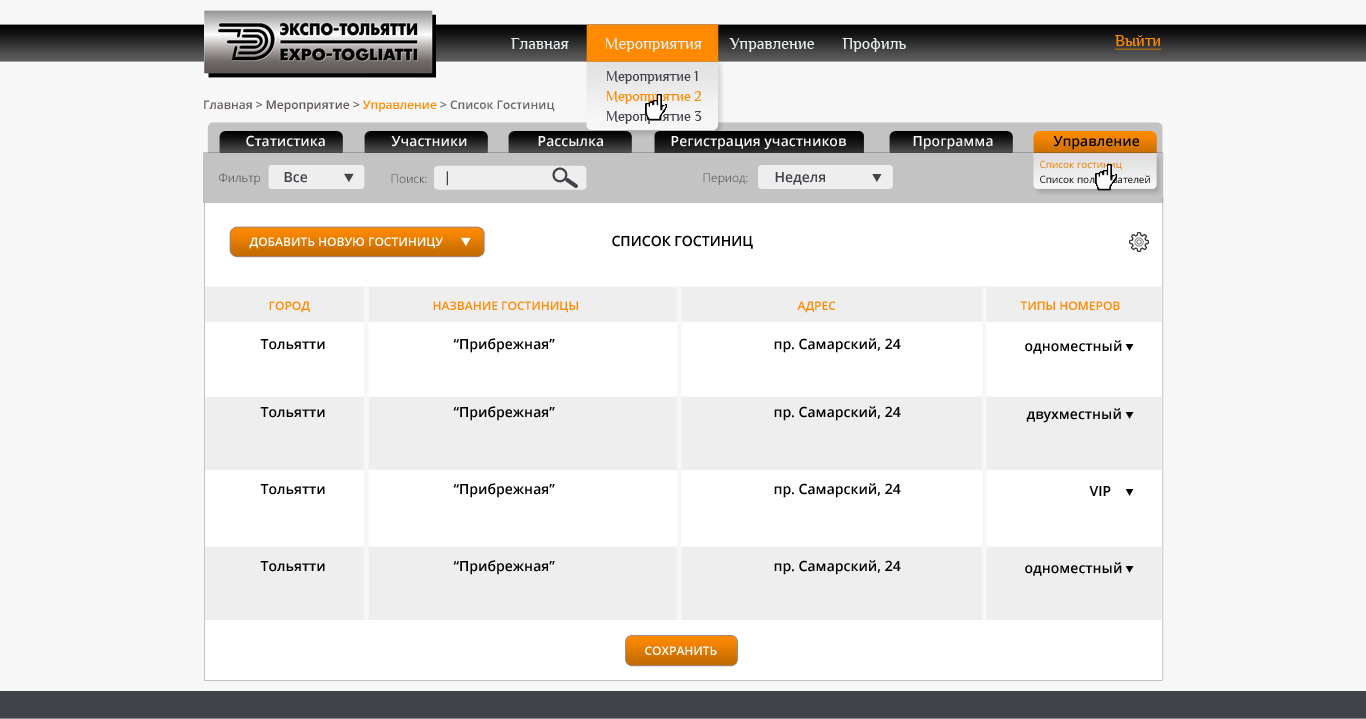
<style>
.page{position:relative;width:1366px;height:719px;background:#f7f7f7}
.page>*{position:absolute;margin:0}
.t1{font:16.5px "Philosopher";color:#e7eff1}
.t2{font:16px "Philosopher";color:#ff8a00;text-decoration:underline}
.t3{font:14.4px/20px "Philosopher";color:#40434a}
.t4{font:14.4px/20px "Philosopher";color:#ff8a00}
.t5{font:12px "OpenSans-Semibold";color:#615a59}
.t6{font:12px "OpenSans-Semibold";color:#ff8a00}
.t7{font:12px "OpenSans-Semibold";color:#65676a}
.t8{font:14px "OpenSans-Semibold";color:#f7f7f7}
.t9{font:14px "OpenSans-Semibold";color:#020202}
.t10{font:10px "OpenSans";color:#ec8001}
.t11{font:12px "OpenSans-Light"}
.t12{font:14px "OpenSans-Semibold";color:#40434a}
.t13{font:12px "OpenSans-Light";color:#40434a}
.t14{font:10px "OpenSans";color:#191919}
.t15{font:12px "OpenSans-Semibold";color:#ffffff}
.t16{font:14px "OpenSans-Semibold";color:#000000}
.t17{font:12px "OpenSans-Semibold";color:#ff8a00;text-transform:uppercase}
</style>
<div class="page">
<p class="t1" style="left:511px;top:38px;width:395px;height:14px">Главная         Мероприятия       Управление       Профиль</p>
<p class="t2" style="left:1115px;top:35px;width:47px;height:15px">Выйти</p>
<p class="t3" style="left:607px;top:71px;width:95px;height:53px">Мероприятие 1<br><span class="t4">Мероприятие 2<br></span>Мероприятие 3</p>
<p class="t5" style="left:204px;top:100px;width:351px;height:12px">Главная &gt; Мероприятие &gt; <span class="t6">Управление </span><span class="t7">&gt; Список Гостиниц</span></p>
<p class="t8" style="left:246px;top:135px;width:79px;height:12px">Статистика</p>
<p class="t8" style="left:391px;top:136px;width:76px;height:11px">Участники</p>
<p class="t8" style="left:538px;top:136px;width:65px;height:11px">Рассылка</p>
<p class="t8" style="left:671px;top:136px;width:175px;height:14px">Регистрация участников</p>
<p class="t8" style="left:913px;top:136px;width:80px;height:14px">Программа</p>
<p class="t9" style="left:1053px;top:136px;width:86px;height:14px">Управление</p>
<p class="t10" style="left:1040px;top:160px;width:82px;height:10px">Список гостиниц</p>
<p class="t11" style="left:219px;top:173px;width:41px;height:12px">Фильтр</p>
<p class="t12" style="left:284px;top:172px;width:23px;height:11px">Все</p>
<p class="t13" style="left:391px;top:174px;width:36px;height:9px">Поиск:</p>
<p class="t12" style="left:446px;top:171px;width:2px;height:15px">|</p>
<p class="t11" style="left:703px;top:173px;width:45px;height:12px">Период:</p>
<p class="t12" style="left:775px;top:172px;width:50px;height:13px">Неделя</p>
<p class="t14" style="left:1040px;top:175px;width:110px;height:8px">Список пользователей</p>
<p class="t15" style="left:249px;top:237px;width:194px;height:12px">ДОБАВИТЬ НОВУЮ ГОСТИНИЦУ</p>
<p class="t16" style="left:612px;top:235px;width:141px;height:14px">СПИСОК ГОСТИНИЦ</p>
<p class="t17" style="left:269px;top:301px;width:41px;height:12px">город</p>
<p class="t17" style="left:433px;top:301px;width:145px;height:12px">название гостиницы</p>
<p class="t17" style="left:797px;top:301px;width:39px;height:12px">адрес</p>
<p class="t17" style="left:1020px;top:301px;width:100px;height:9px">типы номеров</p>
<p class="t16" style="left:260px;top:339px;width:65px;height:11px">Тольятти</p>
<p class="t16" style="left:453px;top:338px;width:102px;height:15px">“Прибрежная”</p>
<p class="t16" style="left:774px;top:338px;width:127px;height:15px">пр. Самарский, 24</p>
<p class="t16" style="left:1025px;top:340px;width:97px;height:14px">одноместный</p>
<p class="t16" style="left:260px;top:407px;width:65px;height:11px">Тольятти</p>
<p class="t16" style="left:453px;top:406px;width:102px;height:15px">“Прибрежная”</p>
<p class="t16" style="left:774px;top:406px;width:127px;height:15px">пр. Самарский, 24</p>
<p class="t16" style="left:1026px;top:408px;width:95px;height:15px">двухместный</p>
<p class="t16" style="left:260px;top:484px;width:65px;height:11px">Тольятти</p>
<p class="t16" style="left:453px;top:483px;width:102px;height:15px">“Прибрежная”</p>
<p class="t16" style="left:774px;top:483px;width:127px;height:15px">пр. Самарский, 24</p>
<p class="t16" style="left:1089px;top:486px;width:22px;height:10px">VIP</p>
<p class="t16" style="left:260px;top:561px;width:65px;height:11px">Тольятти</p>
<p class="t16" style="left:453px;top:560px;width:102px;height:15px">“Прибрежная”</p>
<p class="t16" style="left:774px;top:560px;width:127px;height:15px">пр. Самарский, 24</p>
<p class="t16" style="left:1025px;top:562px;width:97px;height:14px">одноместный</p>
<p class="t15" style="left:645px;top:646px;width:72px;height:9px">СОХРАНИТЬ</p>
</div>
